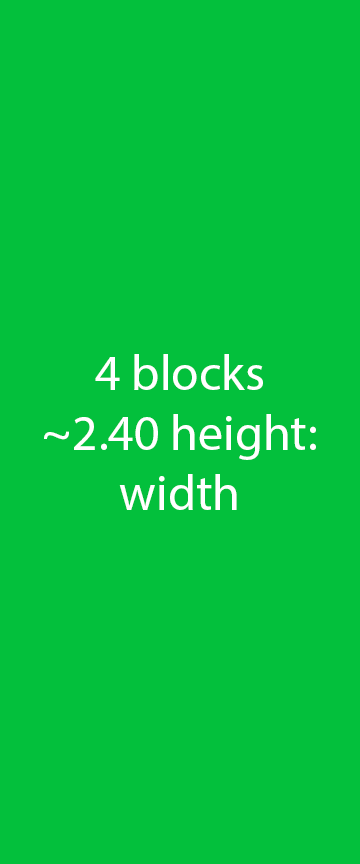
<style>
.page{position:relative;width:360px;height:864px;background:#03c03c}
.page>*{position:absolute;margin:0}
.t1{font:12px "MyriadPro-Regular";color:#ffffff}
</style>
<div class="page">
<p class="t1" style="left:44px;top:354px;width:272px;height:156px;text-align:center">4 blocks<br>~2.40 height:<br>width</p>
</div>
